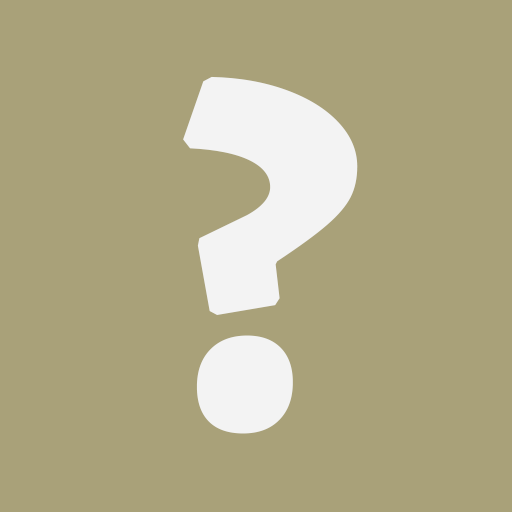
<style>
.page{position:relative;width:512px;height:512px;background:#a9a179}
.page>*{position:absolute;margin:0}
.t1{font:491.7px "Alegreya-Black";color:#f3f3f3}
</style>
<div class="page">
<p class="t1" style="left:183px;top:76px;width:175px;height:358px">?</p>
</div>
